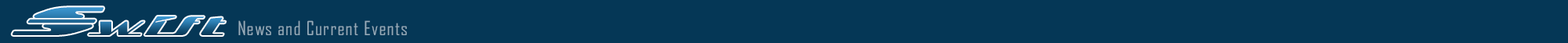
<style>
.page{position:relative;width:1568px;height:43px;background:#053756}
.page>*{position:absolute;margin:0}
.t1{font:18.8px "AgencyFB-Reg";letter-spacing:0.05em;color:#96acba}
</style>
<div class="page">
<p class="t1" style="left:238px;top:20px;width:169px;height:15px">News and Current Events</p>
</div>
